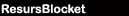
<style>
.page{position:relative;width:129px;height:16px;background:#020100}
.page>*{position:absolute;margin:0}
.t1{font:12px "ArialRoundedMTBold";color:#fefefe}
</style>
<div class="page">
<p class="t1" style="left:1px;top:4px;width:85px;height:10px">ResursBlocket</p>
</div>
